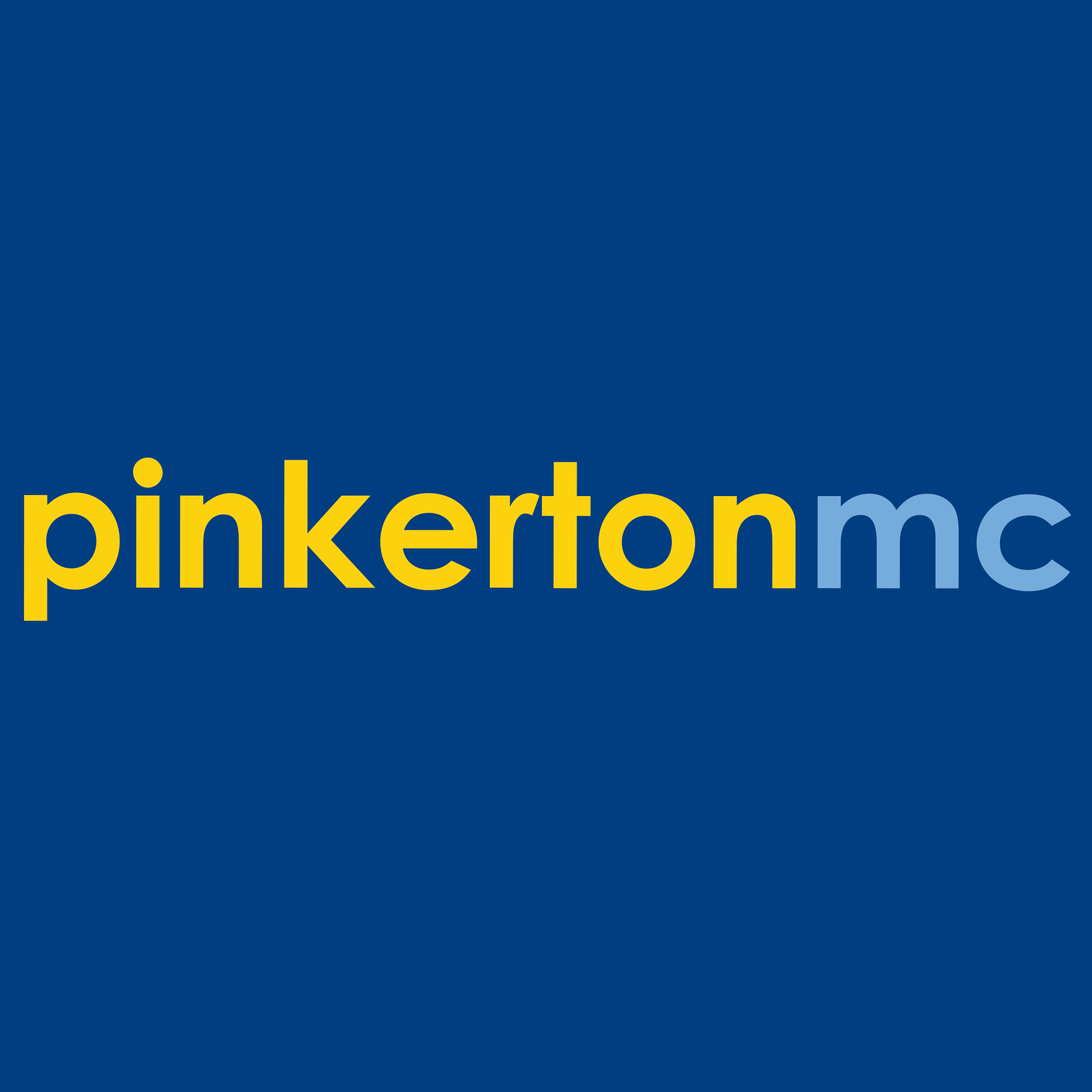
<style>
.page{position:relative;width:1092px;height:1092px;background:#003e81}
.page>*{position:absolute;margin:0}
.t1{font:173.3px "CenturyGothicPro-Bold";color:#fcd20f}
.t2{font:173.3px "CenturyGothicPro-Bold";color:#76acdc}
</style>
<div class="page">
<p class="t1" style="left:24px;top:458px;width:1047px;height:163px">pinkerton<span class="t2">mc</span></p>
</div>
